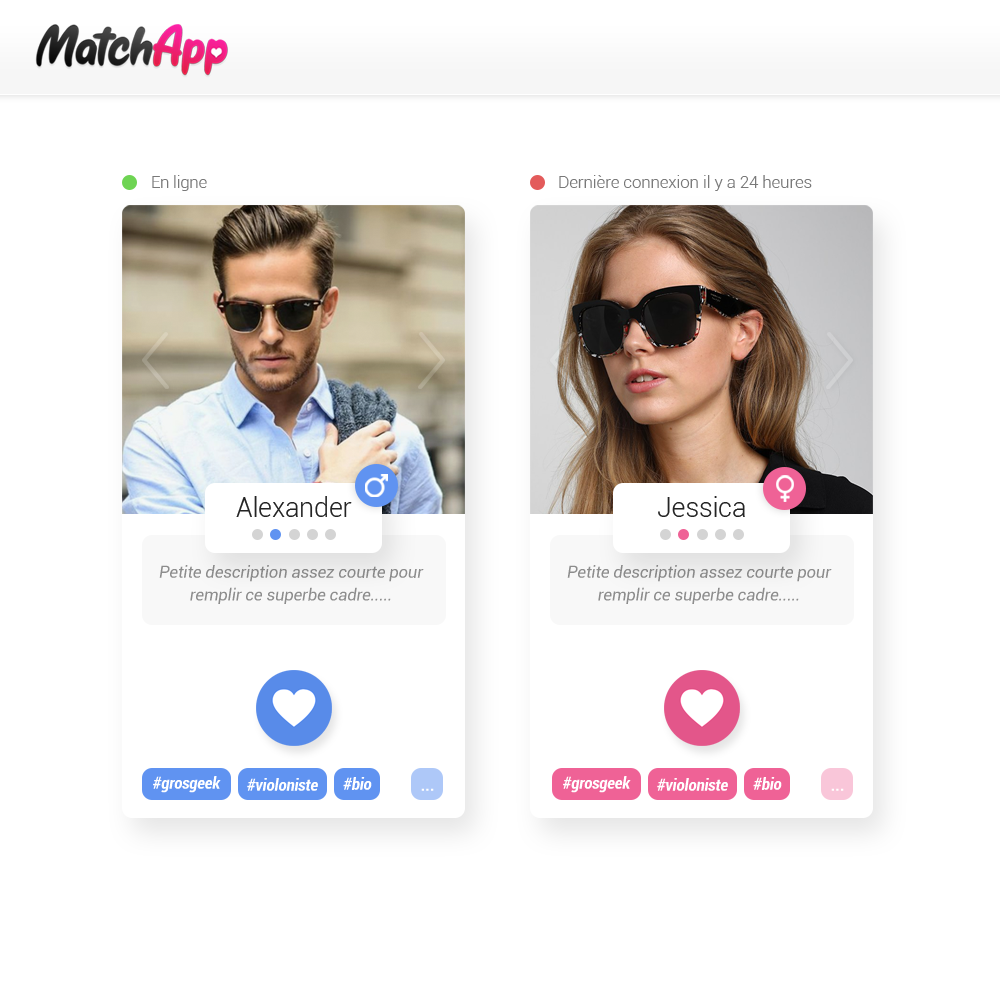
<style>
.page{position:relative;width:1000px;height:1000px;background:#ffffff}
.page>*{position:absolute;margin:0}
.t1{font:16.7px "Roboto-Light";letter-spacing:-0.01em;color:#797979}
.t2{font:16.7px "Roboto-Light";color:#797979}
.t3{font:27.1px "Roboto-Light";letter-spacing:-0.01em;color:#242424}
.t4{font:16.7px/22.9px "Roboto-Italic";letter-spacing:-0.01em;color:#8d8d8d}
.t5{font:16.7px "Roboto-BoldCondensedItalic";letter-spacing:-0.01em;color:#ffffff}
.t6{font:16.7px "Roboto-Bold";letter-spacing:-0.01em;color:#ffffff}
</style>
<div class="page">
<p class="t1" style="left:152px;top:175px;width:55px;height:16px">En ligne</p>
<p class="t2" style="left:559px;top:175px;width:253px;height:16px">Dernière connexion il y a 24 heures</p>
<p class="t3" style="left:236px;top:496px;width:116px;height:21px">Alexander</p>
<p class="t3" style="left:658px;top:496px;width:87px;height:21px">Jessica</p>
<p class="t4" style="left:159px;top:565px;width:265px;height:39px;text-align:center">Petite description assez courte pour remplir ce superbe cadre.....</p>
<p class="t4" style="left:567px;top:565px;width:265px;height:39px;text-align:center">Petite description assez courte pour remplir ce superbe cadre.....</p>
<p class="t5" style="left:153px;top:776px;width:68px;height:17px">#grosgeek</p>
<p class="t5" style="left:247px;top:778px;width:71px;height:13px">#violoniste</p>
<p class="t5" style="left:343px;top:777px;width:29px;height:13px">#bio</p>
<p class="t5" style="left:563px;top:776px;width:68px;height:17px">#grosgeek</p>
<p class="t5" style="left:657px;top:778px;width:71px;height:13px">#violoniste</p>
<p class="t5" style="left:753px;top:777px;width:29px;height:13px">#bio</p>
<p class="t6" style="left:421px;top:788px;width:13px;height:3px">...</p>
<p class="t6" style="left:831px;top:788px;width:13px;height:3px">...</p>
</div>
